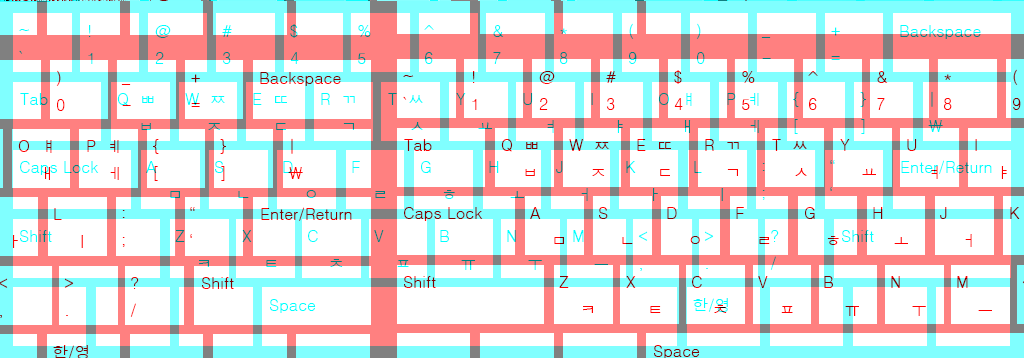
<style>
.page{position:relative;width:1024px;height:358px;background:#ffffff}
.page>*{position:absolute;margin:0}
.t1{font:16px/26.7px "Dotum"}
.t2{font:16px "Dotum"}
.t3{font:16px/26.7px "Dotum";color:#ff8080}
</style>
<div class="page">
<p class="t1" style="left:88px;top:24px;width:5px;height:39px">!<br>1</p>
<p class="t1" style="left:155px;top:24px;width:16px;height:39px">@<br>2</p>
<p class="t1" style="left:222px;top:24px;width:10px;height:39px">#<br>3</p>
<p class="t1" style="left:290px;top:23px;width:9px;height:40px">$<br>4</p>
<p class="t1" style="left:358px;top:24px;width:13px;height:39px">%<br>5</p>
<p class="t1" style="left:424px;top:24px;width:10px;height:39px">^<br>6</p>
<p class="t1" style="left:493px;top:24px;width:11px;height:39px">&amp;<br>7</p>
<p class="t1" style="left:560px;top:27px;width:8px;height:36px">*<br>8</p>
<p class="t1" style="left:629px;top:22px;width:8px;height:41px">(<br>9</p>
<p class="t1" style="left:696px;top:22px;width:9px;height:41px">)<br>0</p>
<p class="t2" style="left:20px;top:92px;width:28px;height:12px">Tab</p>
<p class="t1" style="left:117px;top:92px;width:37px;height:37px">Q  ㅃ<br>    ㅂ</p>
<p class="t1" style="left:185px;top:92px;width:40px;height:37px">W  ㅉ<br>    ㅈ</p>
<p class="t1" style="left:321px;top:92px;width:34px;height:37px">R  ㄲ<br>    ㄱ</p>
<p class="t1" style="left:388px;top:92px;width:35px;height:37px">T  ㅆ<br>    ㅅ</p>
<p class="t1" style="left:456px;top:92px;width:36px;height:36px">Y<br>    ㅛ</p>
<p class="t1" style="left:523px;top:92px;width:31px;height:40px">U<br>    ㅕ</p>
<p class="t1" style="left:591px;top:92px;width:32px;height:40px">I<br>    ㅑ</p>
<p class="t1" style="left:658px;top:92px;width:34px;height:40px">O  ㅒ<br>    ㅐ</p>
<p class="t1" style="left:727px;top:92px;width:32px;height:40px">P  ㅖ<br>    ㅔ</p>
<p class="t1" style="left:793px;top:91px;width:6px;height:42px">{<br>[</p>
<p class="t1" style="left:860px;top:91px;width:6px;height:42px">}<br>]</p>
<p class="t1" style="left:928px;top:90px;width:15px;height:41px">|<br>\</p>
<p class="t2" style="left:20px;top:160px;width:79px;height:14px">Caps Lock</p>
<p class="t1" style="left:146px;top:160px;width:34px;height:37px">A  <br>    ㅁ</p>
<p class="t1" style="left:215px;top:160px;width:34px;height:37px">S  <br>    ㄴ</p>
<p class="t1" style="left:283px;top:160px;width:33px;height:37px">D  <br>    ㅇ</p>
<p class="t1" style="left:489px;top:160px;width:35px;height:37px">H<br>    ㅗ</p>
<p class="t3" style="left:556px;top:160px;width:32px;height:40px">J<br>    ㅓ</p>
<p class="t1" style="left:626px;top:160px;width:32px;height:40px">K<br>    ㅏ</p>
<p class="t1" style="left:694px;top:160px;width:29px;height:40px">L  <br>    ㅣ</p>
<p class="t1" style="left:830px;top:159px;width:5px;height:31px">“<br>‘</p>
<p class="t2" style="left:901px;top:159px;width:91px;height:14px">Enter/Return</p>
<p class="t3" style="left:762px;top:162px;width:3px;height:37px">:<br>;</p>
<p class="t2" style="left:20px;top:229px;width:32px;height:12px">Shift</p>
<p class="t3" style="left:242px;top:229px;width:35px;height:37px">X  <br>    ㅌ</p>
<p class="t1" style="left:374px;top:229px;width:35px;height:37px">V  <br>    ㅍ</p>
<p class="t1" style="left:440px;top:229px;width:35px;height:40px">B  <br>    ㅠ</p>
<p class="t1" style="left:507px;top:229px;width:35px;height:40px">N<br>    ㅜ</p>
<p class="t1" style="left:573px;top:229px;width:35px;height:35px">M<br>    ㅡ</p>
<p class="t1" style="left:638px;top:230px;width:10px;height:40px">&lt;<br>,</p>
<p class="t1" style="left:704px;top:230px;width:10px;height:38px">&gt;<br>.</p>
<p class="t1" style="left:770px;top:229px;width:9px;height:40px">?<br>/</p>
<p class="t2" style="left:842px;top:229px;width:32px;height:12px">Shift</p>
</div>
